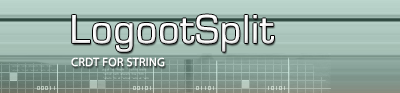
<style>
.page{position:relative;width:400px;height:93px}
.page>*{position:absolute;margin:0}
.t1{font:42px "EurostileRegular";letter-spacing:0.025em;color:#ffffff}
.t2{font:12px "MyriadPro-Regular";letter-spacing:0.025em;color:#ffffff}
</style>
<div class="page">
<p class="t1" style="left:72px;top:14px;width:202px;height:38px">LogootSplit</p>
<p class="t2" style="left:71px;top:57px;width:94px;height:10px">CRDT FOR STRING</p>
</div>
